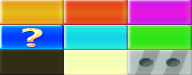
<style>
.page{position:relative;width:192px;height:75px}
.page>*{position:absolute;margin:0}
.t1{font:26.7px "LeelawadeeUI-Bold";scale:1.92 1}
</style>
<div class="page">
<p class="t1" style="left:22px;top:28px;width:21px;height:19px">?</p>
</div>
